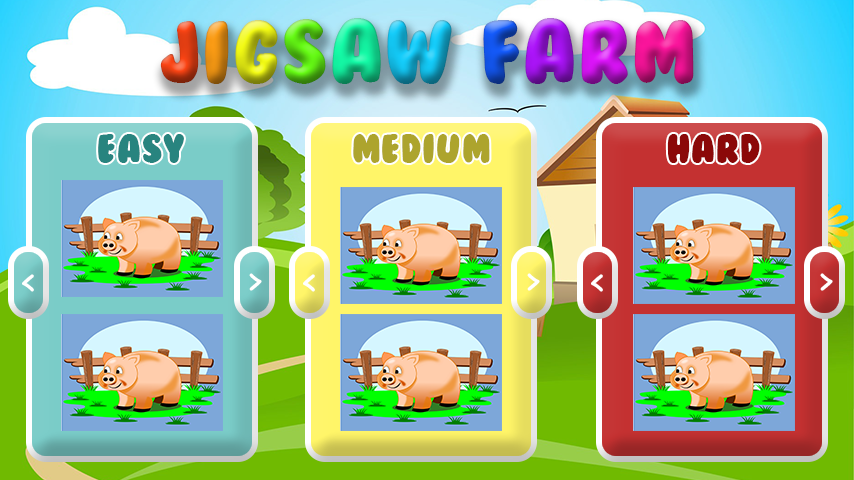
<style>
.page{position:relative;width:854px;height:480px}
.page>*{position:absolute;margin:0}
.t1{font:82.8px "BubbleGum";letter-spacing:0.025em}
.t2{font:37.1px "BubbleGum";letter-spacing:0.025em;color:#28847f}
.t3{font:37.1px "BubbleGum";letter-spacing:0.025em;color:#ada42d}
.t4{font:37.1px "BubbleGum";letter-spacing:0.025em;color:#8b0909}
.t5{font:37.1px "ComicSansMS";letter-spacing:0.025em;color:#ffffff}
</style>
<div class="page">
<p class="t1" style="left:160px;top:18px;width:534px;height:66px">Jigsaw Farm</p>
<p class="t2" style="left:98px;top:134px;width:86px;height:29px">easy</p>
<p class="t3" style="left:353px;top:134px;width:137px;height:29px">medium</p>
<p class="t4" style="left:667px;top:134px;width:93px;height:29px">hard</p>
<p class="t5" style="left:22px;top:274px;width:12px;height:18px;rotate:177deg">&gt;</p>
<p class="t5" style="left:249px;top:273px;width:13px;height:18px;rotate:-3deg">&gt;</p>
<p class="t5" style="left:303px;top:274px;width:12px;height:18px;rotate:177deg">&gt;</p>
<p class="t5" style="left:527px;top:273px;width:13px;height:18px;rotate:-3deg">&gt;</p>
<p class="t5" style="left:591px;top:274px;width:12px;height:18px;rotate:177deg">&gt;</p>
<p class="t5" style="left:820px;top:273px;width:13px;height:18px;rotate:-4deg">&gt;</p>
</div>
